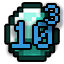
<style>
.page{position:relative;width:64px;height:64px;background:#ffffff}
.page>*{position:absolute;margin:0}
.t1{font:20.8px "Minecraftia-Regular";color:#3498db}
.t2{font:29.2px "Minecraftia-Regular";color:#3498db}
</style>
<div class="page">
<p class="t1" style="left:45px;top:5px;width:13px;height:19px">3</p>
<p class="t2" style="left:12px;top:22px;width:40px;height:26px">10</p>
</div>
